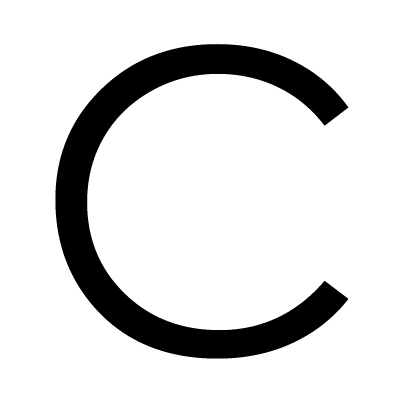
<style>
.page{position:relative;width:400px;height:400px;background:#ffffff}
.page>*{position:absolute;margin:0}
.t1{font:416.7px "CenturyGothic";color:#000000}
</style>
<div class="page">
<p class="t1" style="left:55px;top:44px;width:294px;height:315px">C</p>
</div>
